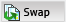
<style>
.page{position:relative;width:66px;height:22px}
.page>*{position:absolute;margin:0}
.t1{font:11.2px "Tahoma";letter-spacing:0.1em;color:#000000;scale:0.86 1}
</style>
<div class="page">
<p class="t1" style="left:24px;top:8px;width:26px;height:10px">Swap</p>
</div>
